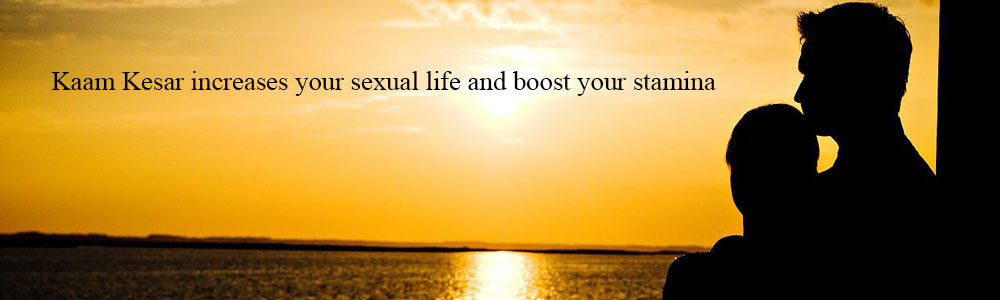
<style>
.page{position:relative;width:1000px;height:300px;background:#000000}
.page>*{position:absolute;margin:0}
.t1{font:26.7px "TimesNewRomanPSMT";color:#000000}
</style>
<div class="page">
<p class="t1" style="left:51px;top:71px;width:665px;height:25px">Kaam Kesar increases your sexual life and boost your stamina</p>
</div>
